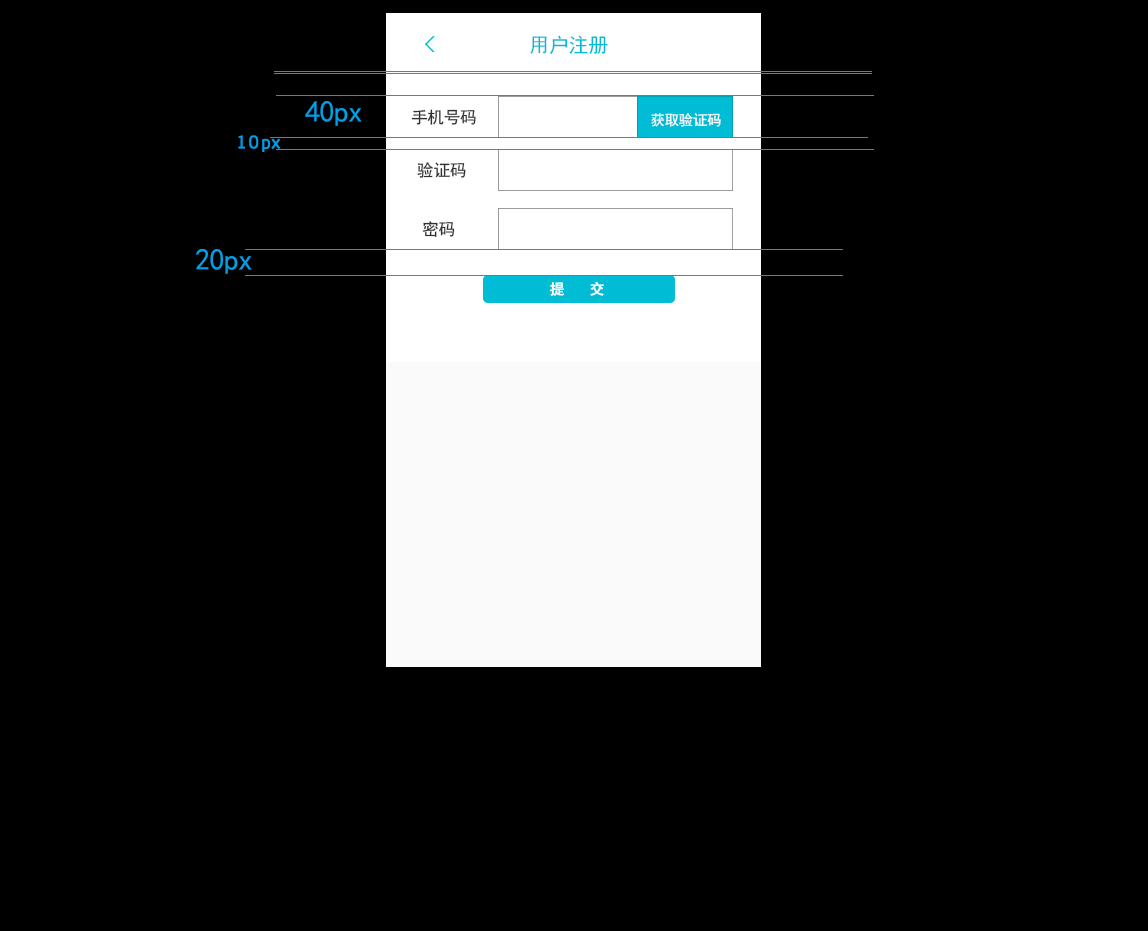
<style>
.page{position:relative;width:1148px;height:931px;background:#000000}
.page>*{position:absolute;margin:0}
.t1{font:20px "SimHei";letter-spacing:-0.02em;color:#00bcd4}
.t2{font:30px "SimHei";letter-spacing:-0.02em;color:#00a0e9}
.t3{font:16.7px "SimHei";letter-spacing:-0.02em;color:#2e3031}
.t4{font:14.4px "SimHei";letter-spacing:-0.02em;color:#ffffff}
.t5{font:18px "MFYueHei_Noncommercial-Regular";letter-spacing:0.06em;color:#00a0e9;font-weight:bold}
.t6{font:14.4px "SimHei";letter-spacing:0.02em;color:#ffffff;font-weight:bold}
</style>
<div class="page">
<p class="t1" style="left:530px;top:35px;width:78px;height:19px">用户注册</p>
<p class="t2" style="left:305px;top:101px;width:57px;height:25px">40px</p>
<p class="t3" style="left:411px;top:109px;width:65px;height:16px">手机号码</p>
<p class="t4" style="left:651px;top:113px;width:70px;height:14px">获取验证码</p>
<p class="t5" style="left:238px;top:135px;width:43px;height:17px">10px</p>
<p class="t3" style="left:417px;top:162px;width:49px;height:16px">验证码</p>
<p class="t3" style="left:422px;top:221px;width:33px;height:16px">密码</p>
<p class="t2" style="left:196px;top:249px;width:56px;height:25px">20px</p>
<p class="t6" style="left:550px;top:282px;width:54px;height:14px">提  交</p>
</div>
